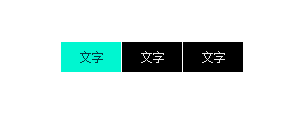
<style>
.page{position:relative;width:304px;height:113px;background:#ffffff}
.page>*{position:absolute;margin:0}
.t1{font:12px "SimSun";color:#033840}
.t2{font:12px "SimSun";color:#e9e9e9}
</style>
<div class="page">
<p class="t1" style="left:80px;top:51px;width:23px;height:12px">文字</p>
<p class="t1" style="left:80px;top:51px;width:23px;height:12px">文字</p>
<p class="t2" style="left:141px;top:51px;width:23px;height:12px">文字</p>
<p class="t2" style="left:141px;top:51px;width:23px;height:12px">文字</p>
<p class="t2" style="left:202px;top:51px;width:23px;height:12px">文字</p>
<p class="t2" style="left:202px;top:51px;width:23px;height:12px">文字</p>
</div>
